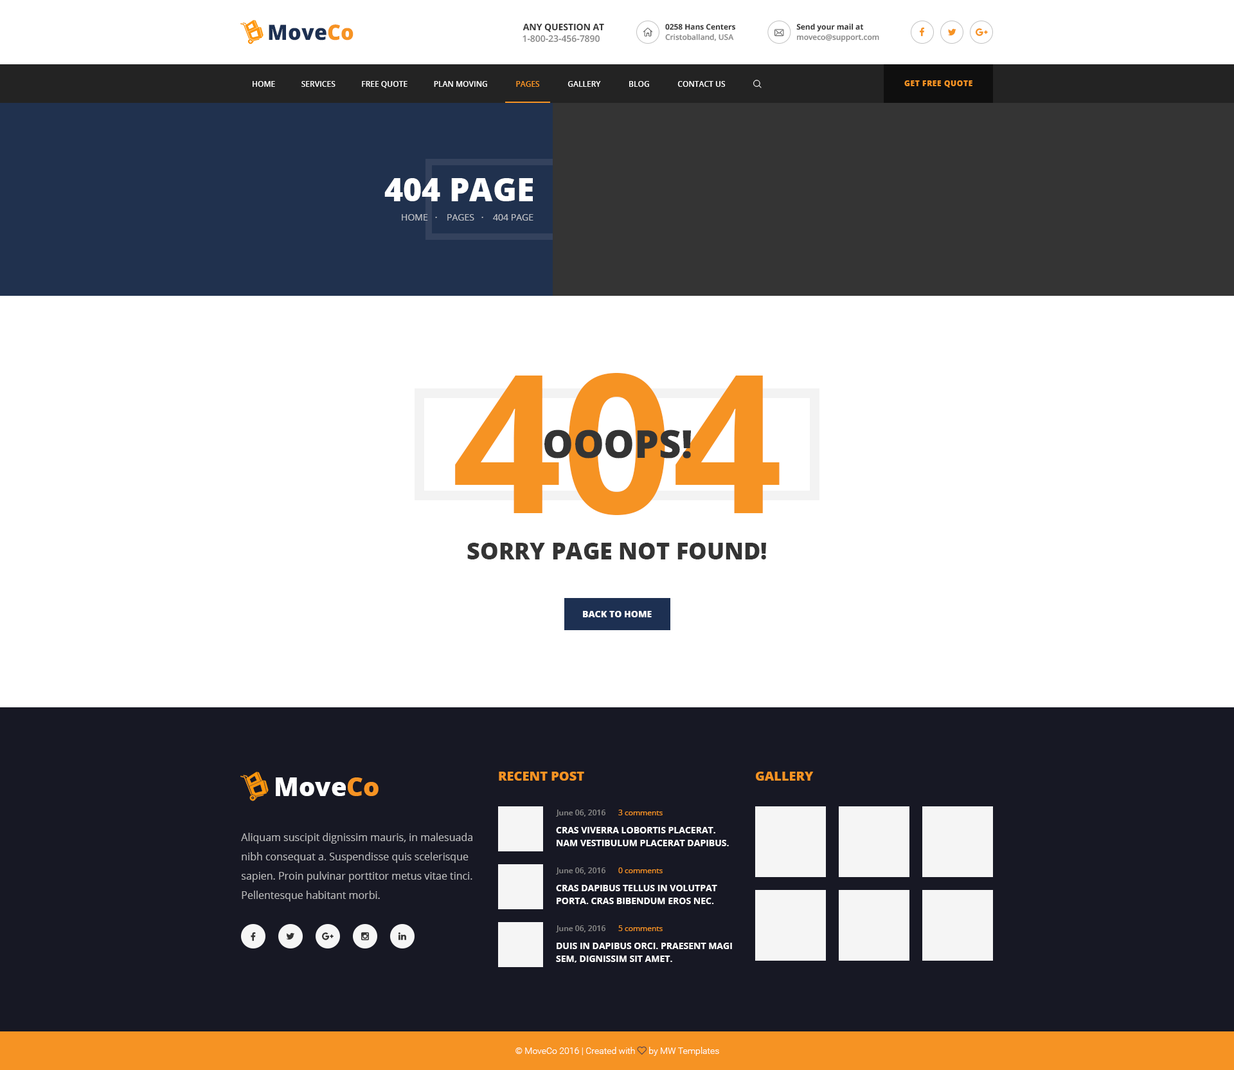
<style>
.page{position:relative;width:1234px;height:1070px;background:#ffffff}
.page>*{position:absolute;margin:0}
.t1{font:21.2px "OpenSans-Extrabold";color:#1d3052}
.t2{font:21.2px "OpenSans-Extrabold";color:#f69323}
.t3{font:9px "OpenSans-Bold";color:#343434;text-transform:uppercase}
.t4{font:7.7px "OpenSans-Bold";color:#343434}
.t5{font:9px "OpenSans-Semibold";color:#868686}
.t6{font:7.7px "OpenSans-Semibold";color:#868686}
.t7{font:7.7px "OpenSans-Extrabold";letter-spacing:0.05em;color:#f69323;text-transform:uppercase}
.t8{font:32.1px "OpenSans-Extrabold";color:#ffffff;text-transform:uppercase}
.t9{font:9px "OpenSans";color:#bcbfc5;text-transform:uppercase}
.t10{font:192.9px "OpenSans-Bold";color:#f69323;text-transform:uppercase}
.t11{font:38.6px "OpenSans-Extrabold";color:#343434;text-transform:uppercase}
.t12{font:23.1px "OpenSans-Extrabold";color:#343434;text-transform:uppercase}
.t13{font:9px "OpenSans-Extrabold";color:#ffffff;text-transform:uppercase}
.t14{font:12.9px "OpenSans-Extrabold";color:#f69323;text-transform:uppercase}
.t15{font:25.7px "OpenSans-Extrabold";color:#fefeff}
.t16{font:25.7px "OpenSans-Extrabold";color:#f69323}
.t17{font:7.7px "OpenSans";color:#f69323}
.t18{font:10.3px/19.3px "OpenSans";color:#bbbbbc}
.t19{font:9px/12.9px "OpenSans-Bold";color:#ffffff;text-transform:uppercase}
</style>
<div class="page">
<p class="t1" style="left:269px;top:24px;width:85px;height:16px">Move<span class="t2">Co</span></p>
<p class="t3" style="left:523px;top:23px;width:81px;height:9px">Any Question at</p>
<p class="t4" style="left:665px;top:24px;width:70px;height:6px">0258 Hans Centers</p>
<p class="t4" style="left:797px;top:23px;width:67px;height:9px">Send your mail at</p>
<p class="t5" style="left:523px;top:35px;width:77px;height:7px">1-800-23-456-7890</p>
<p class="t6" style="left:665px;top:33px;width:69px;height:8px">Cristoballand, USA</p>
<p class="t6" style="left:797px;top:34px;width:82px;height:8px">moveco@support.com</p>
<p class="t7" style="left:905px;top:80px;width:68px;height:7px">Get Free Quote</p>
<p class="t8" style="left:384px;top:178px;width:149px;height:23px">404 page</p>
<p class="t9" style="left:402px;top:214px;width:132px;height:7px">home   ·    pages   ·    404 Page</p>
<p class="t10" style="left:455px;top:373px;width:325px;height:142px">404</p>
<p class="t11" style="left:544px;top:429px;width:147px;height:29px">ooops!</p>
<p class="t12" style="left:467px;top:543px;width:299px;height:16px">SORRY PAGE NOT FOUND!</p>
<p class="t13" style="left:583px;top:611px;width:69px;height:6px">back to home</p>
<p class="t14" style="left:499px;top:771px;width:85px;height:9px">recent post</p>
<p class="t14" style="left:756px;top:771px;width:58px;height:9px">Gallery</p>
<p class="t15" style="left:276px;top:777px;width:103px;height:19px">Move<span class="t16">Co</span></p>
<p class="t6" style="left:556px;top:809px;width:50px;height:7px">June 06, 2016</p>
<p class="t17" style="left:618px;top:809px;width:45px;height:6px">3 comments</p>
<p class="t18" style="left:241px;top:833px;width:232px;height:68px">Aliquam suscipit dignissim mauris, in malesuada nibh consequat a. Suspendisse quis scelerisque sapien. Proin pulvinar porttitor metus vitae tinci. Pellentesque habitant morbi.</p>
<p class="t19" style="left:556px;top:827px;width:173px;height:19px">Cras viverra lobortis placerat. Nam vestibulum placerat dapibus.</p>
<p class="t6" style="left:556px;top:867px;width:50px;height:7px">June 06, 2016</p>
<p class="t17" style="left:618px;top:867px;width:45px;height:6px">0 comments</p>
<p class="t19" style="left:556px;top:885px;width:161px;height:19px">Cras dapibus tellus in volutpat porta. Cras bibendum eros nec.</p>
<p class="t6" style="left:556px;top:925px;width:50px;height:7px">June 06, 2016</p>
<p class="t17" style="left:618px;top:925px;width:45px;height:6px">5 comments</p>
<p class="t19" style="left:556px;top:942px;width:176px;height:20px">Duis in dapibus orci. Praesent magi sem, dignissim sit amet.</p>
</div>
